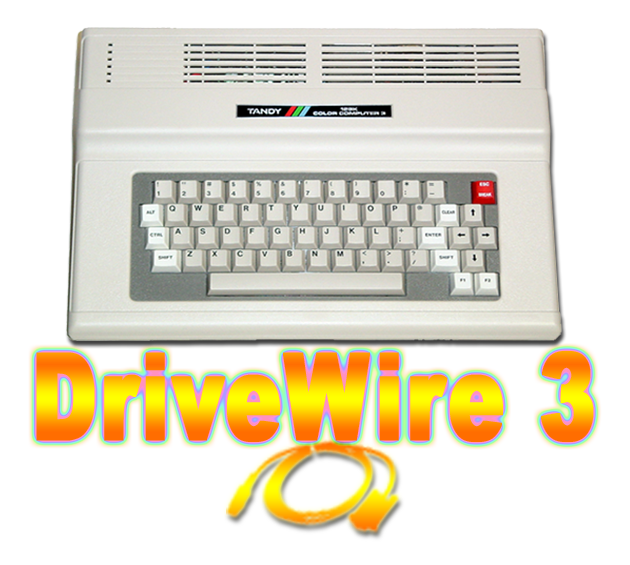
<style>
.page{position:relative;width:630px;height:565px;background:#ffffff}
.page>*{position:absolute;margin:0}
.t1{font:121px "Arial-Black";letter-spacing:0.01em;font-weight:bold;scale:0.7 1}
</style>
<div class="page">
<p class="t1" style="left:36px;top:351px;width:558px;height:91px">DriveWire 3</p>
</div>
